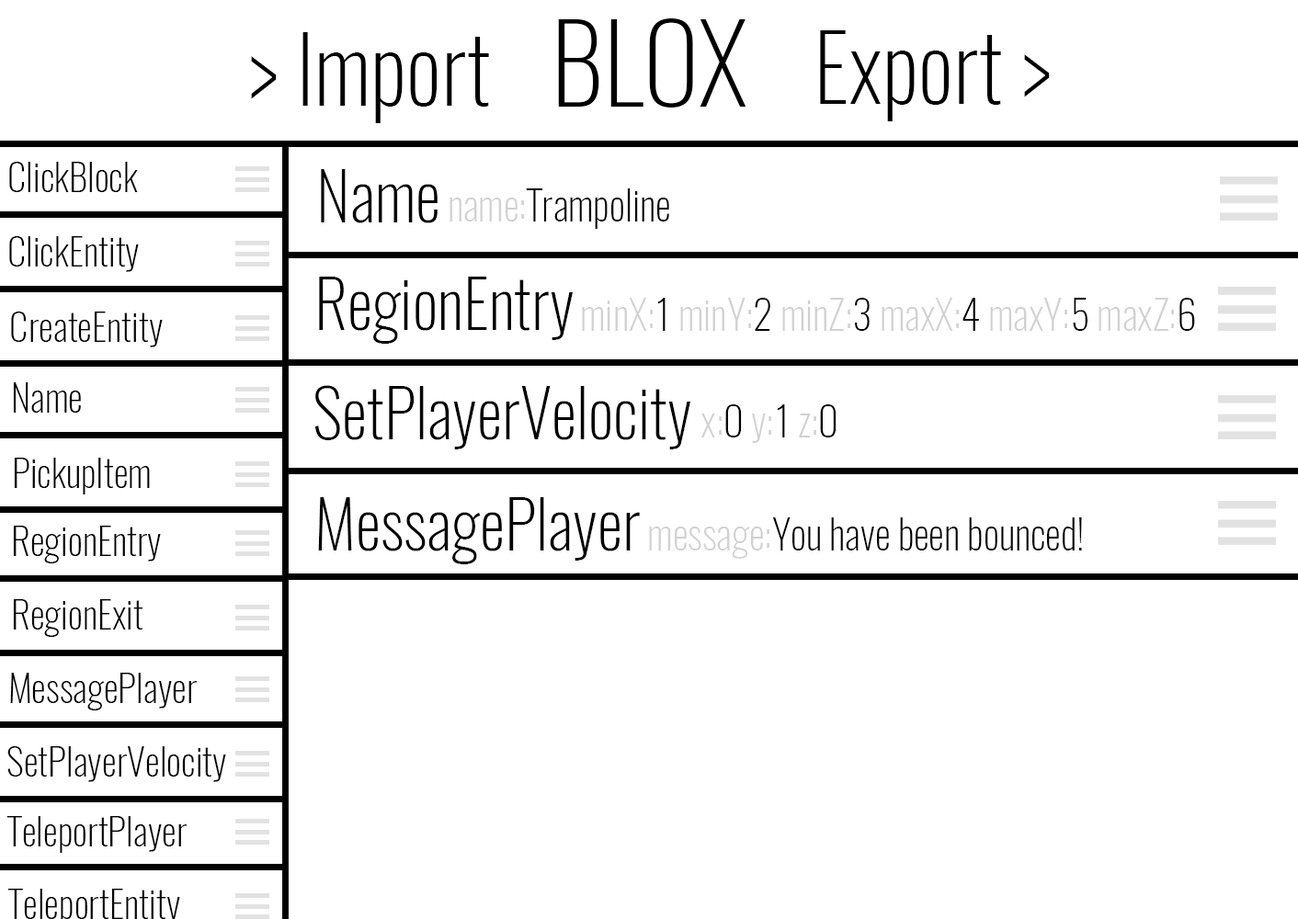
<style>
.page{position:relative;width:1298px;height:919px;background:#ffffff}
.page>*{position:absolute;margin:0}
.t1{font:107.2px "Oswald-ExtraLight";color:#000000}
.t2{font:90.2px "Oswald-ExtraLight";color:#000000}
.t3{font:37.9px "Oswald-ExtraLight";color:#000000}
.t4{font:65.3px "Oswald-ExtraLight";color:#000000}
.t5{font:40.2px "Oswald-ExtraLight";color:#000000}
.t6{font:40.2px "Oswald-ExtraLight";color:#d1d1d1}
</style>
<div class="page">
<p class="t1" style="left:558px;top:18px;width:188px;height:90px">BLOX</p>
<p class="t2" style="left:251px;top:32px;width:238px;height:91px">&gt; Import</p>
<p class="t2" style="left:820px;top:30px;width:229px;height:91px">Export &gt;</p>
<p class="t3" style="left:9px;top:162px;width:129px;height:30px">ClickBlock</p>
<p class="t4" style="left:321px;top:169px;width:116px;height:54px">Name</p>
<p class="t5" style="left:449px;top:188px;width:220px;height:41px"><span class="t6">name:</span>Trampoline</p>
<p class="t3" style="left:9px;top:236px;width:130px;height:36px">ClickEntity</p>
<p class="t4" style="left:319px;top:277px;width:254px;height:67px">RegionEntry</p>
<p class="t6" style="left:582px;top:298px;width:613px;height:33px">minX:<span class="t5">1</span> minY:<span class="t5">2</span> minZ:<span class="t5">3</span> maxX:<span class="t5">4</span> maxY:<span class="t5">5</span> maxZ:<span class="t5">6</span></p>
<p class="t3" style="left:11px;top:312px;width:152px;height:35px">CreateEntity</p>
<p class="t3" style="left:13px;top:382px;width:68px;height:31px">Name</p>
<p class="t4" style="left:315px;top:385px;width:376px;height:64px">SetPlayerVelocity</p>
<p class="t6" style="left:700px;top:404px;width:136px;height:39px">x:<span class="t5">0 </span>y:<span class="t5">1 </span>z:<span class="t5">0</span></p>
<p class="t3" style="left:14px;top:458px;width:136px;height:36px">PickupItem</p>
<p class="t4" style="left:318px;top:497px;width:322px;height:67px">MessagePlayer</p>
<p class="t5" style="left:649px;top:517px;width:433px;height:42px"><span class="t6">message:</span>You have been bounced!</p>
<p class="t3" style="left:13px;top:526px;width:148px;height:37px">RegionEntry</p>
<p class="t3" style="left:13px;top:599px;width:130px;height:38px">RegionExit</p>
<p class="t3" style="left:10px;top:673px;width:187px;height:37px">MessagePlayer</p>
<p class="t3" style="left:7px;top:746px;width:219px;height:36px">SetPlayerVelocity</p>
<p class="t3" style="left:6px;top:816px;width:181px;height:37px">TeleportPlayer</p>
</div>
